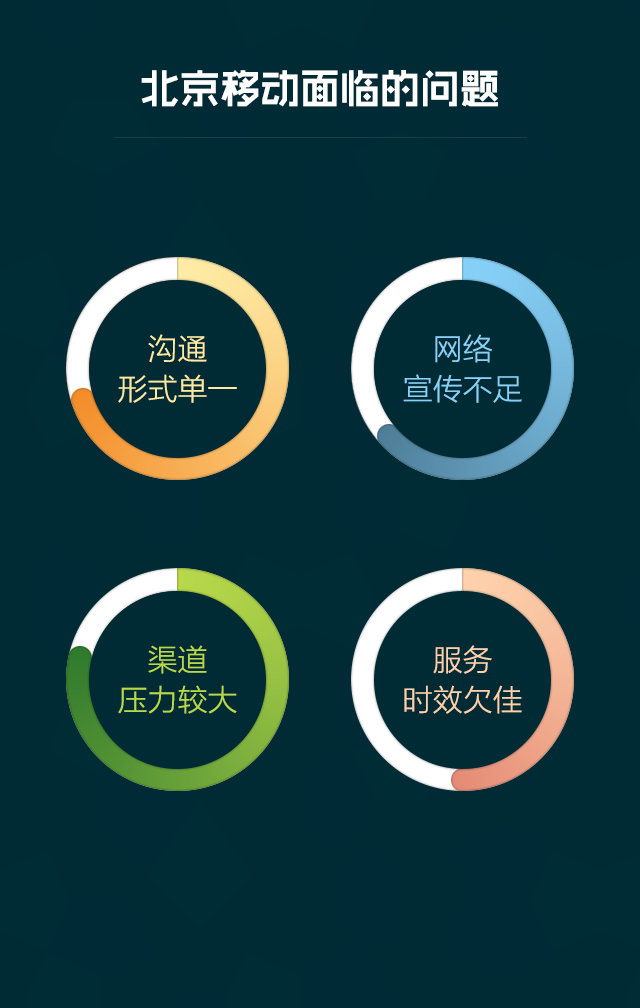
<style>
.page{position:relative;width:640px;height:1008px;background:#002b35}
.page>*{position:absolute;margin:0}
.t1{font:40px "RTWSShangGoG0v1-Bold";color:#ffffff}
.t2{font:30px/40.1px "FZLTKHK--GBK1-0";color:#ffeaa4}
.t3{font:30px/40.1px "FZLTKHK--GBK1-0";color:#87d1f9}
.t4{font:30px/40.1px "FZLTKHK--GBK1-0";color:#b8d84a}
.t5{font:30px/40.1px "FZLTKHK--GBK1-0";color:#fed2ac}
</style>
<div class="page">
<p class="t1" style="left:141px;top:70px;width:357px;height:37px">北京移动面临的问题</p>
<p class="t2" style="left:118px;top:334px;width:119px;height:69px;text-align:center">沟通<br>形式单一</p>
<p class="t3" style="left:403px;top:334px;width:119px;height:69px;text-align:center">网络<br>宣传不足</p>
<p class="t4" style="left:118px;top:645px;width:119px;height:69px;text-align:center">渠道<br>压力较大</p>
<p class="t5" style="left:404px;top:645px;width:118px;height:69px;text-align:center">服务<br>时效欠佳</p>
</div>
